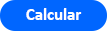
<style>
.page{position:relative;width:107px;height:31px;background:#0066ff}
.page>*{position:absolute;margin:0}
.t1{font:16.7px "Calibri-Bold";color:#ffffff}
</style>
<div class="page">
<p class="t1" style="left:26px;top:8px;width:56px;height:12px">Calcular</p>
</div>
